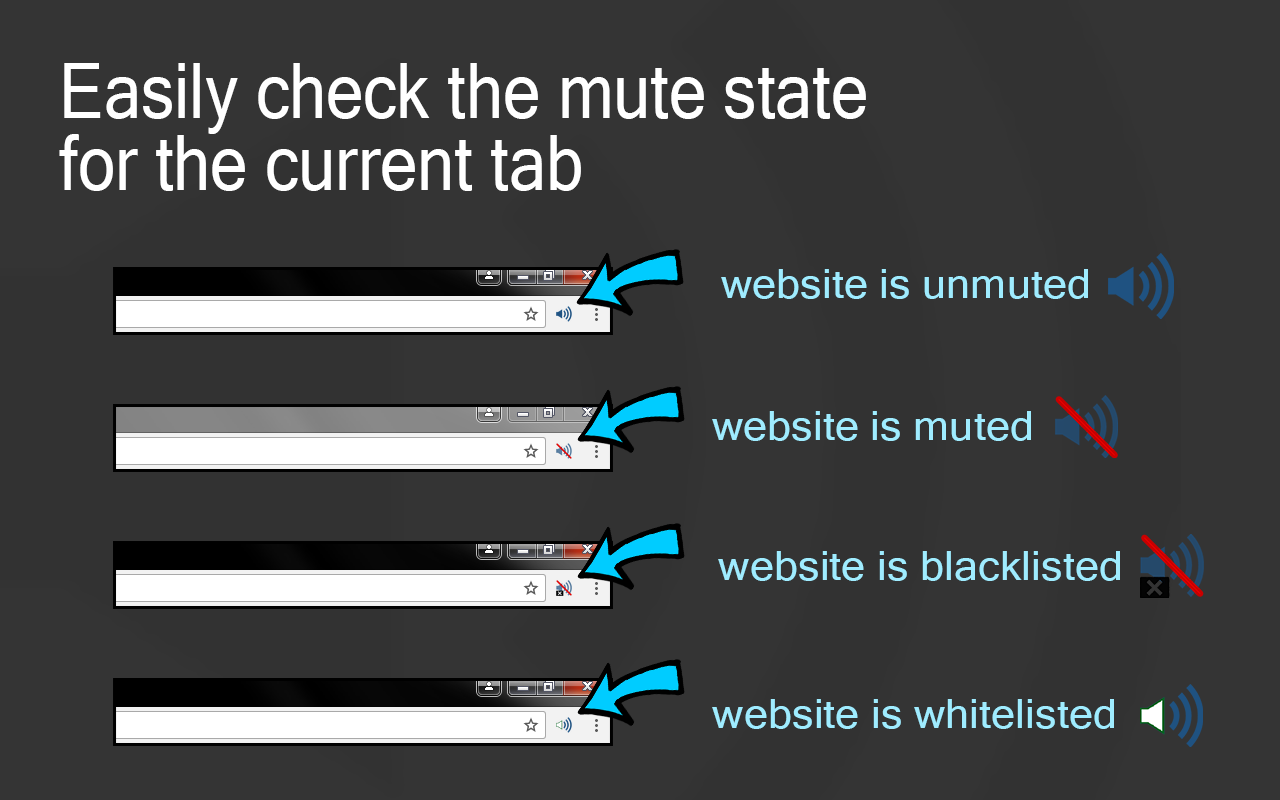
<style>
.page{position:relative;width:1280px;height:800px;background:#343434}
.page>*{position:absolute;margin:0}
.t1{font:76.8px/72px "MicrosoftSansSerif";color:#ffffff;scale:0.87 1}
.t2{font:41px "MicrosoftSansSerif";color:#9fecff;scale:1.06 1}
</style>
<div class="page">
<p class="t1" style="left:59px;top:63px;width:807px;height:128px">Easily check the mute state<br>for the current tab</p>
<p class="t2" style="left:721px;top:269px;width:367px;height:30px">website is unmuted</p>
<p class="t2" style="left:712px;top:411px;width:319px;height:30px">website is muted</p>
<p class="t2" style="left:718px;top:551px;width:402px;height:30px">website is blacklisted</p>
<p class="t2" style="left:712px;top:699px;width:402px;height:30px">website is whitelisted</p>
</div>
